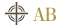
<style>
.page{position:relative;width:69px;height:27px;background:#ffffff}
.page>*{position:absolute;margin:0}
.t1{font:18px "RyuminPro-ExBold";letter-spacing:-0.08em;color:#ae9442;scale:0.9 1}
</style>
<div class="page">
<p class="t1" style="left:33px;top:7px;width:23px;height:14px">AB</p>
</div>
